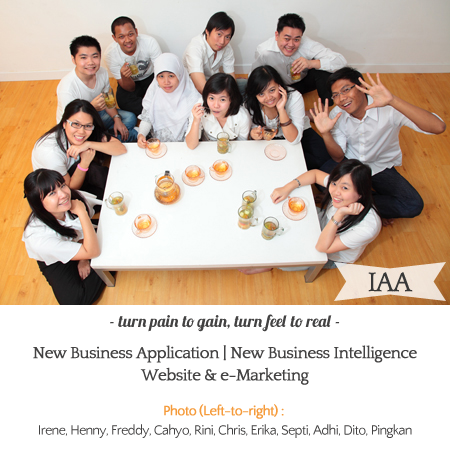
<style>
.page{position:relative;width:450px;height:451px;background:#ffffff}
.page>*{position:absolute;margin:0}
.t1{font:16.7px "Lobster1.3";color:#434242}
.t2{font:16.7px/22.2px "Quattrocento";letter-spacing:-0.05em;color:#434242;font-weight:bold}
.t3{font:13.9px/19.4px "QuattrocentoSans";letter-spacing:-0.05em;color:#434242}
.t4{font:13.9px/19.4px "QuattrocentoSans";letter-spacing:-0.05em;color:#f59b3b;font-weight:bold}
</style>
<div class="page">
<p class="t1" style="left:110px;top:314px;width:230px;height:18px">- turn pain to gain, turn feel to real -</p>
<p class="t2" style="left:33px;top:345px;width:384px;height:40px;text-align:center">New Business Application | New Business Intelligence<br>Website &amp; e-Marketing</p>
<p class="t3" style="left:39px;top:404px;width:373px;height:34px;text-align:center"><span class="t4">Photo (Left-to-right) : <br></span>Irene, Henny, Freddy, Cahyo, Rini, Chris, Erika, Septi, Adhi, Dito, Pingkan</p>
</div>
